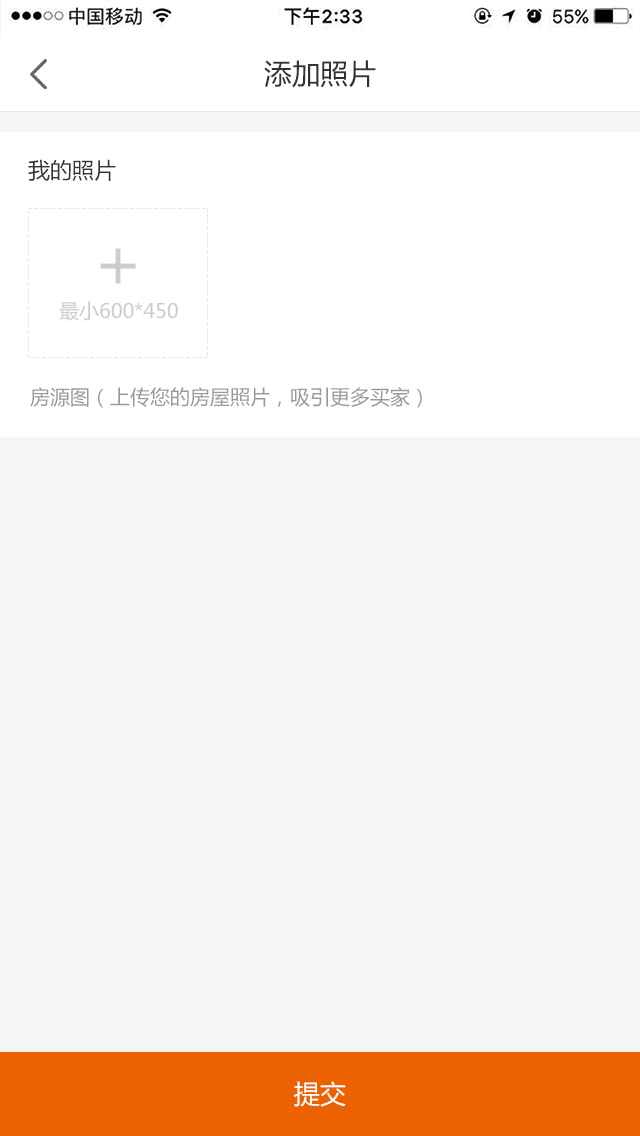
<style>
.page{position:relative;width:640px;height:1136px;background:#f5f5f5}
.page>*{position:absolute;margin:0}
.t1{font:28px "MicrosoftYaHei";color:#333333}
.t2{font:22px "MicrosoftYaHei";color:#333333}
.t3{font:20px "MicrosoftYaHei";color:#cccccc}
.t4{font:20px "MicrosoftYaHei";color:#999999}
.t5{font:26px "MicrosoftYaHei";color:#ffffff}
</style>
<div class="page">
<p class="t1" style="left:264px;top:60px;width:112px;height:28px">添加照片</p>
<p class="t2" style="left:28px;top:159px;width:88px;height:22px">我的照片</p>
<p class="t3" style="left:59px;top:301px;width:119px;height:20px">最小600*450</p>
<p class="t4" style="left:30px;top:387px;width:392px;height:21px">房源图（上传您的房屋照片，吸引更多买家）</p>
<p class="t5" style="left:294px;top:1081px;width:52px;height:26px">提交</p>
</div>
